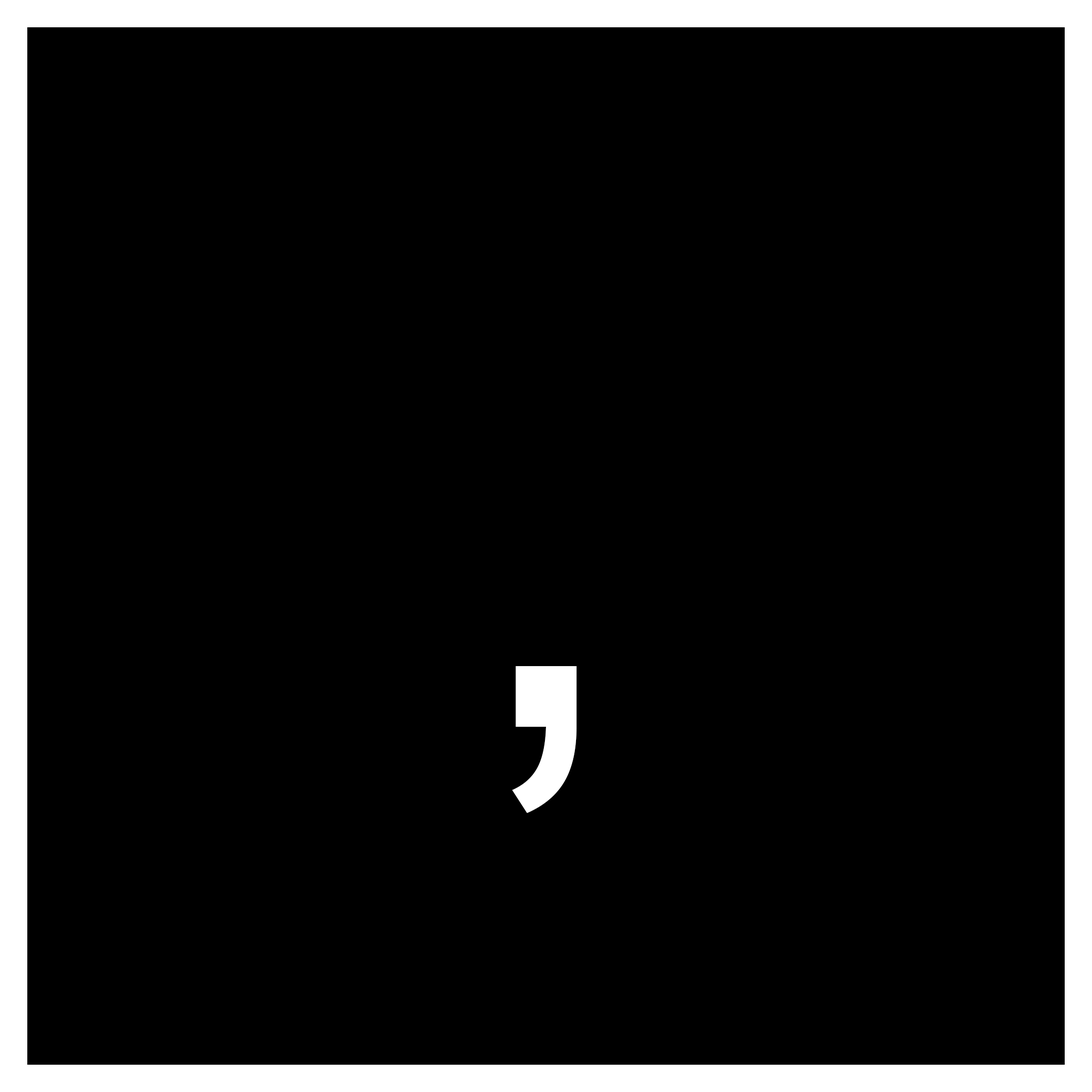
<style>
.page{position:relative;width:1092px;height:1092px;background:#000000}
.page>*{position:absolute;margin:0}
.t1{font:606.7px "ArialMT";color:#ffffff}
</style>
<div class="page">
<p class="t1" style="left:512px;top:666px;width:65px;height:147px">,</p>
</div>
